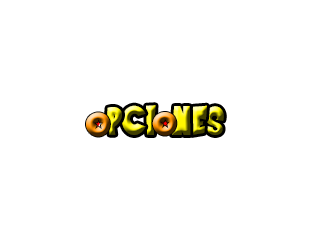
<style>
.page{position:relative;width:320px;height:240px;background:#ffffff}
.page>*{position:absolute;margin:0}
.t1{font:48px "SaiyanSans"}
.t2{font:60px "SaiyanSans"}
</style>
<div class="page">
<p class="t1" style="left:107px;top:107px;width:15px;height:28px">p</p>
<p class="t1" style="left:122px;top:105px;width:24px;height:30px">c</p>
<p class="t1" style="left:146px;top:105px;width:10px;height:30px">i</p>
<p class="t2" style="left:152px;top:112px;width:25px;height:24px">o</p>
<p class="t1" style="left:172px;top:106px;width:19px;height:29px">n</p>
<p class="t1" style="left:191px;top:105px;width:16px;height:30px">e</p>
<p class="t1" style="left:206px;top:106px;width:18px;height:29px">s</p>
</div>
